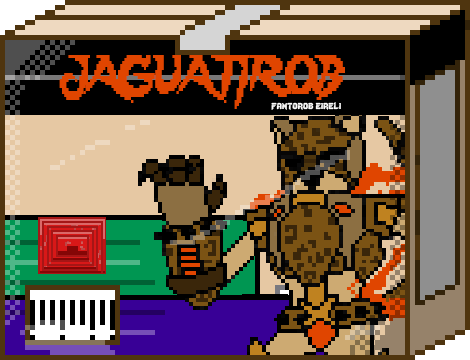
<style>
.page{position:relative;width:470px;height:360px}
.page>*{position:absolute;margin:0}
.t1{font:48px "Lady-Radical";color:#e04500;scale:0.72 1}
.t2{font:12px "Lady-Radical";color:#fbfbfb}
</style>
<div class="page">
<p class="t1" style="left:59px;top:55px;width:286px;height:54px">JAGUATIROB</p>
<p class="t2" style="left:271px;top:102px;width:70px;height:8px">fantorob eireli</p>
</div>
